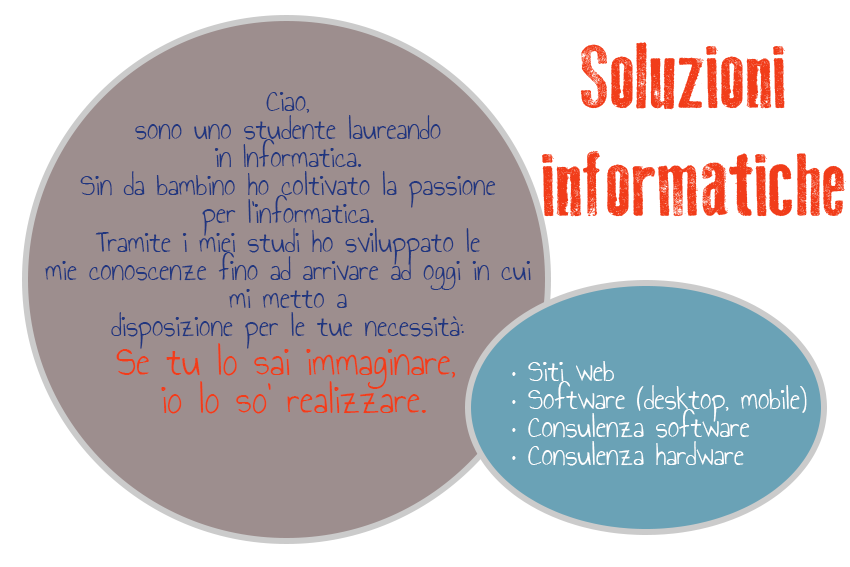
<style>
.page{position:relative;width:850px;height:567px;background:#ffffff}
.page>*{position:absolute;margin:0}
.t1{font:90px "OldPress";color:#f13d1a}
.t2{font:23.5px "AnnieUseYourTelescope";color:#20367f}
.t3{font:31.8px "AnnieUseYourTelescope";color:#f13d1a}
.t4{font:23.5px "AnnieUseYourTelescope";color:#ffffff}
</style>
<div class="page">
<p class="t1" style="left:542px;top:42px;width:304px;height:175px;text-align:center">Soluzioni <br>informatiche</p>
<p class="t2" style="left:45px;top:92px;width:486px;height:322px;text-align:center">Ciao, <br>sono uno studente laureando <br>in Informatica. <br>Sin da bambino ho coltivato la passione <br>per l’informatica. <br>Tramite i miei studi ho sviluppato le <br>mie conoscenze fino ad arrivare ad oggi in cui <br>mi metto a <br>disposizione per le tue necessità: <br><span class="t3">Se tu lo sai immaginare, <br>io lo so’ realizzare.</span></p>
<p class="t4" style="left:512px;top:361px;width:295px;height:105px">• Siti web <br>• Software (desktop, mobile)<br>• Consulenza software<br>• Consulenza hardware</p>
</div>
